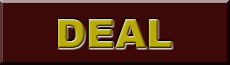
<style>
.page{position:relative;width:230px;height:65px;background:#3d0808}
.page>*{position:absolute;margin:0}
.t1{font:40px "Arial-Black"}
</style>
<div class="page">
<p class="t1" style="left:58px;top:19px;width:114px;height:29px">DEAL</p>
<p class="t1" style="left:58px;top:19px;width:114px;height:29px">DEAL</p>
</div>
